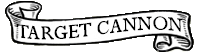
<style>
.page{position:relative;width:204px;height:52px;background:#ffffff}
.page>*{position:absolute;margin:0}
.t1{font:22px "Perpetua";color:#000000}
</style>
<div class="page">
<p class="t1" style="left:16px;top:16px;width:167px;height:24px;rotate:-2deg">TARGET CANNON</p>
</div>
